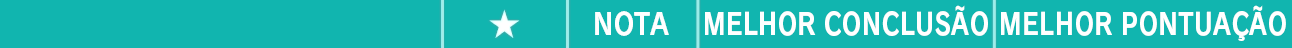
<style>
.page{position:relative;width:1292px;height:48px;background:#11b5af}
.page>*{position:absolute;margin:0}
.t1{font:29.3px "RodinPro-B";letter-spacing:0.009em;color:#ffffff;scale:0.83 1}
.t2{font:29.3px "RodinPro-B";letter-spacing:0.015em;color:#ffffff;scale:0.83 1}
.t3{font:29.3px "RodinPro-B";letter-spacing:-0.014em;color:#ffffff;scale:0.88 1}
</style>
<div class="page">
<p class="t1" style="left:705px;top:5px;width:283px;height:31px">MELHOR CONCLUSÃO</p>
<p class="t2" style="left:1001px;top:5px;width:285px;height:36px">MELHOR PONTUAÇÃO</p>
<p class="t3" style="left:595px;top:11px;width:74px;height:25px">NOTA</p>
</div>
